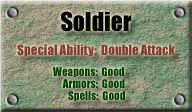
<style>
.page{position:relative;width:192px;height:112px}
.page>*{position:absolute;margin:0}
.t1{font:24px "Impact";color:#000000}
.t2{font:13px "Impact";color:#853c2f}
.t3{font:11px "Impact";color:#003e00}
</style>
<div class="page">
<p class="t1" style="left:61px;top:11px;width:71px;height:21px">Soldier</p>
<p class="t2" style="left:17px;top:44px;width:158px;height:13px">Special Ability:  Double Attack</p>
<p class="t3" style="left:53px;top:67px;width:71px;height:10px">Weapons:  Good</p>
<p class="t3" style="left:62px;top:79px;width:63px;height:9px">Armors:  Good</p>
<p class="t3" style="left:68px;top:91px;width:57px;height:10px">Spells:  Good</p>
</div>
